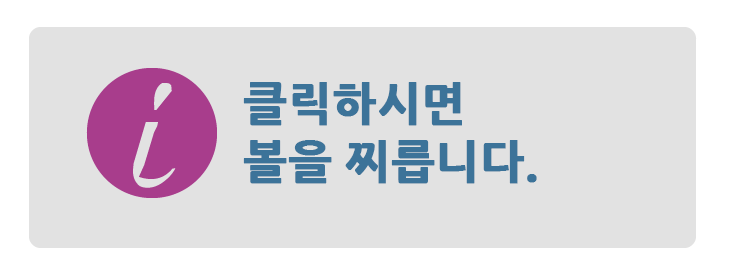
<style>
.page{position:relative;width:736px;height:270px;background:#e2e2e2}
.page>*{position:absolute;margin:0}
.t1{font:46px/58px "NanumGothicExtraBold";color:#3c7399;font-weight:bold}
</style>
<div class="page">
<p class="t1" style="left:243px;top:82px;width:294px;height:102px;text-align:justify">클릭하시면 <br>볼을 찌릅니다.</p>
</div>
